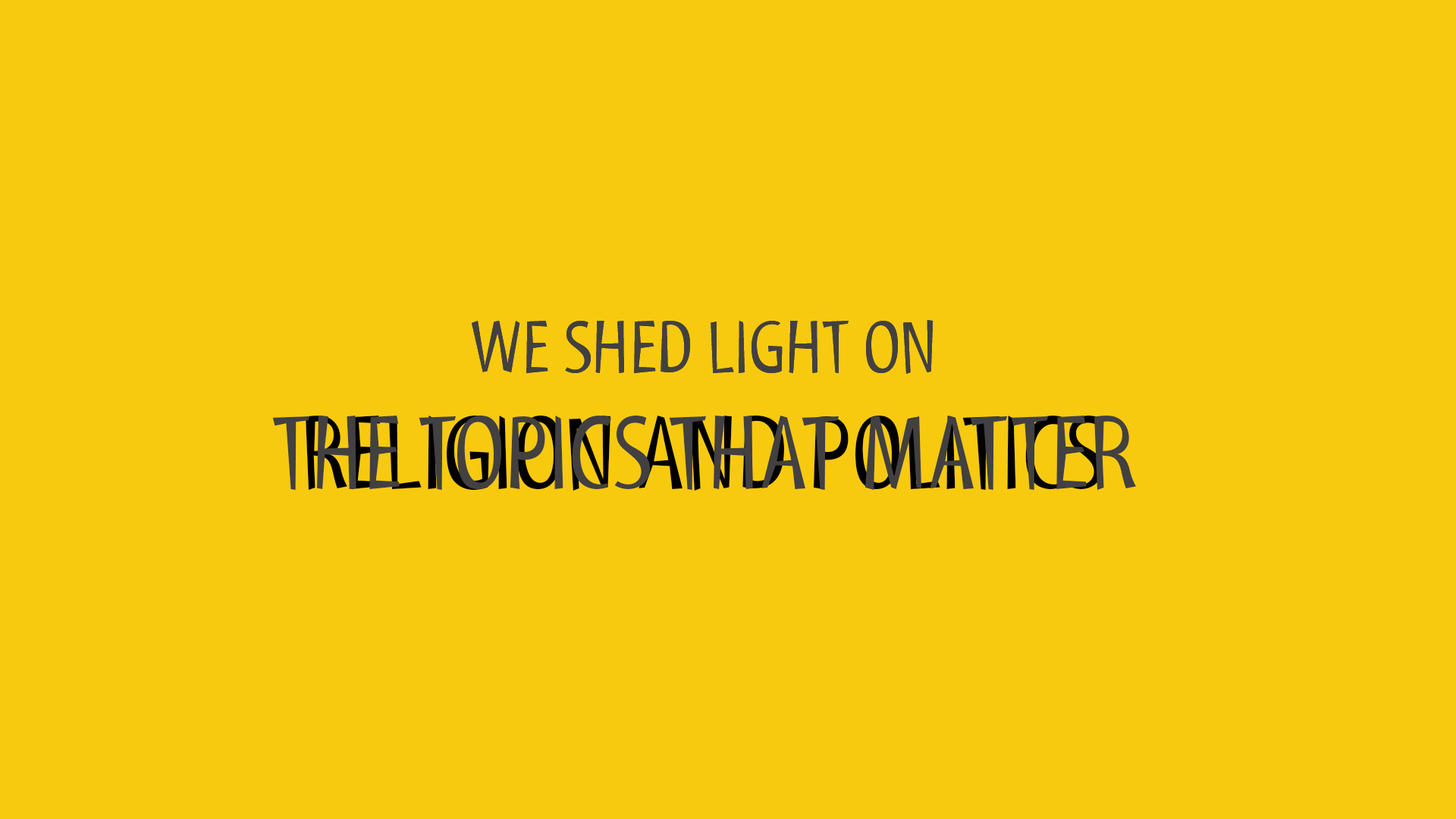
<style>
.page{position:relative;width:1456px;height:819px;background:#f7ca10}
.page>*{position:absolute;margin:0}
.t1{font:75.8px "MyriadStd-Tilt";color:#424041}
.t2{font:106.2px "MyriadStd-Tilt";color:#424041}
.t3{font:106.2px "MyriadStd-Tilt";color:#010101;text-transform:uppercase}
</style>
<div class="page">
<p class="t1" style="left:472px;top:320px;width:461px;height:54px">WE SHED LIGHT ON</p>
<p class="t1" style="left:472px;top:320px;width:461px;height:54px">WE SHED LIGHT ON</p>
<p class="t2" style="left:272px;top:415px;width:864px;height:75px">THE TOPICS THAT MATTER</p>
<p class="t3" style="left:306px;top:415px;width:797px;height:76px">Religion and Politics</p>
</div>
